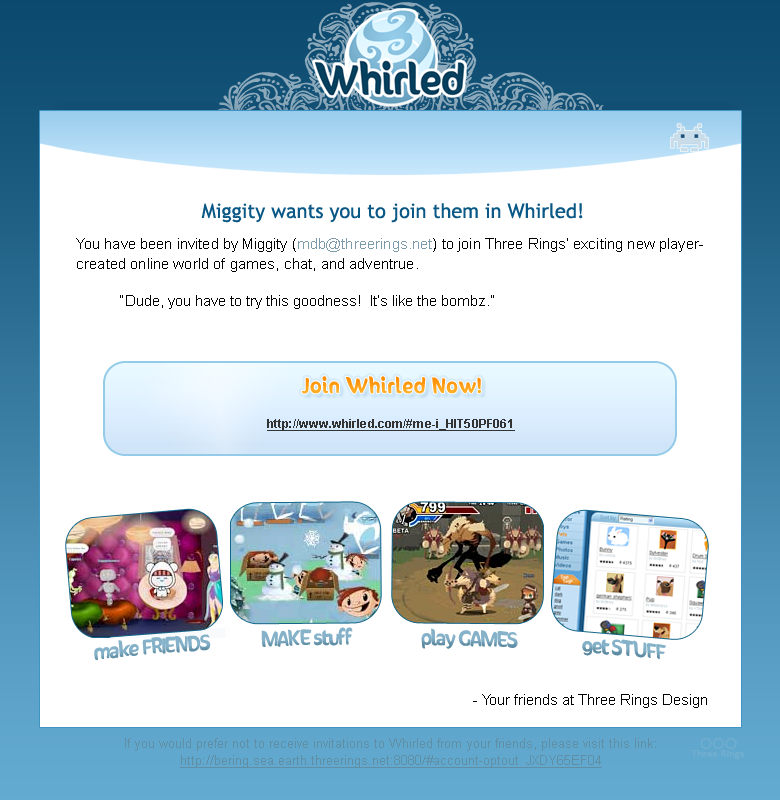
<style>
.page{position:relative;width:780px;height:800px;background:#ffffff}
.page>*{position:absolute;margin:0}
.t1{font:20px "TrebuchetMS";color:#0a5886}
.t2{font:15px/20px "ArialMT";letter-spacing:0.01em;color:#000000}
.t3{font:15px/20px "ArialMT";letter-spacing:0.01em;color:#7d9aab}
.t4{font:15px "ArialMT";color:#000000}
.t5{font:18px "SunnySide";letter-spacing:0.05em;color:#ff8e19}
.t6{font:12px "Arial-BoldMT";letter-spacing:0.01em;color:#343434;text-decoration:underline}
.t7{font:18px/6.1px "SunnySide";letter-spacing:-0.05em;color:#85b2c9}
.t8{font:10px "P22Underground";letter-spacing:0.01em;color:#72afcf}
</style>
<div class="page">
<p class="t1" style="left:201px;top:203px;width:382px;height:20px">Miggity wants you to join them in Whirled!</p>
<p class="t2" style="left:76px;top:238px;width:627px;height:34px">You have been invited by Miggity (<span class="t3">mdb@threerings.net</span>) to join Three Rings’ exciting new player-<br>created online world of games, chat, and adventrue.</p>
<p class="t4" style="left:120px;top:295px;width:374px;height:14px">“Dude, you have to try this goodness!  It’s like the bombz.”</p>
<p class="t5" style="left:302px;top:376px;width:179px;height:18px">Join Whirled Now!</p>
<p class="t6" style="left:267px;top:419px;width:248px;height:12px">http://www.whirled.com/#me-i_HIT50PF061</p>
<p class="t7" style="left:94px;top:627px;width:572px;height:33px">make FRIENDS        MAKE stuff                   play GAMES                  get STUFF</p>
<p class="t4" style="left:473px;top:694px;width:234px;height:14px">- Your friends at Three Rings Design</p>
<p class="t8" style="left:691px;top:750px;width:53px;height:10px">Three Rings</p>
</div>
